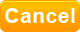
<style>
.page{position:relative;width:80px;height:32px}
.page>*{position:absolute;margin:0}
.t1{font:21px "Arial-BoldMT";letter-spacing:0.025em;color:#ffffff}
</style>
<div class="page">
<p class="t1" style="left:4px;top:5px;width:72px;height:26px">Cancel</p>
</div>
